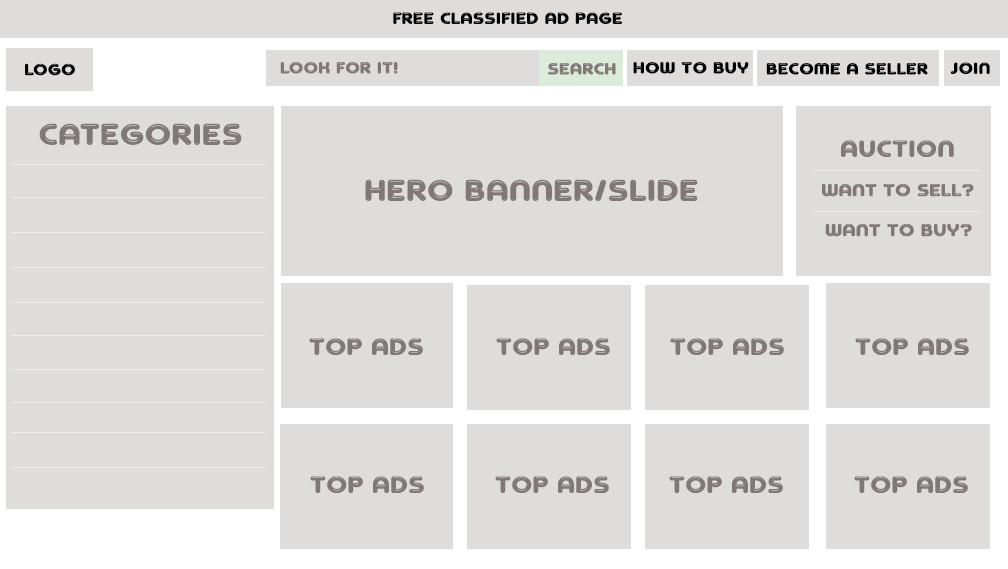
<style>
.page{position:relative;width:1008px;height:569px;background:#dfdcdc}
.page>*{position:absolute;margin:0}
.t1{font:15.3px "AgetaChubbyDemo";color:#000000;font-weight:bold;scale:1.15 1}
.t2{font:15.3px "AgetaChubbyDemo";color:#807777;font-weight:bold;scale:1.15 1}
.t3{font:28.1px "AgetaChubbyDemo";color:#807777;font-weight:bold;scale:1.15 1}
.t4{font:22.3px "AgetaChubbyDemo";color:#807777;font-weight:bold;scale:1.15 1}
.t5{font:16.4px "AgetaChubbyDemo";color:#807777;font-weight:bold;scale:1.15 1}
</style>
<div class="page">
<p class="t1" style="left:393px;top:12px;width:229px;height:12px">FREE CLASSIFIED AD PAGE</p>
<p class="t1" style="left:25px;top:63px;width:50px;height:13px">LOGO</p>
<p class="t2" style="left:280px;top:62px;width:118px;height:12px">LOOK FOR IT!</p>
<p class="t2" style="left:548px;top:63px;width:68px;height:12px">SEARCH</p>
<p class="t1" style="left:633px;top:62px;width:116px;height:12px">HOW TO BUY</p>
<p class="t1" style="left:766px;top:63px;width:162px;height:12px">BECOME A SELLER</p>
<p class="t1" style="left:950px;top:62px;width:40px;height:12px">JOIN</p>
<p class="t3" style="left:39px;top:123px;width:203px;height:22px">CATEGORIES</p>
<p class="t4" style="left:841px;top:140px;width:113px;height:17px">AUCTION</p>
<p class="t3" style="left:365px;top:179px;width:333px;height:22px">HERO BANNER/SLIDE</p>
<p class="t5" style="left:822px;top:184px;width:152px;height:13px">WANT TO SELL?</p>
<p class="t5" style="left:825px;top:224px;width:147px;height:13px">WANT TO BUY?</p>
<p class="t4" style="left:309px;top:338px;width:114px;height:17px">TOP ADS</p>
<p class="t4" style="left:496px;top:338px;width:114px;height:17px">TOP ADS</p>
<p class="t4" style="left:670px;top:338px;width:114px;height:17px">TOP ADS</p>
<p class="t4" style="left:855px;top:338px;width:114px;height:17px">TOP ADS</p>
<p class="t4" style="left:310px;top:476px;width:114px;height:17px">TOP ADS</p>
<p class="t4" style="left:495px;top:476px;width:114px;height:17px">TOP ADS</p>
<p class="t4" style="left:669px;top:476px;width:114px;height:17px">TOP ADS</p>
<p class="t4" style="left:854px;top:476px;width:114px;height:17px">TOP ADS</p>
</div>
